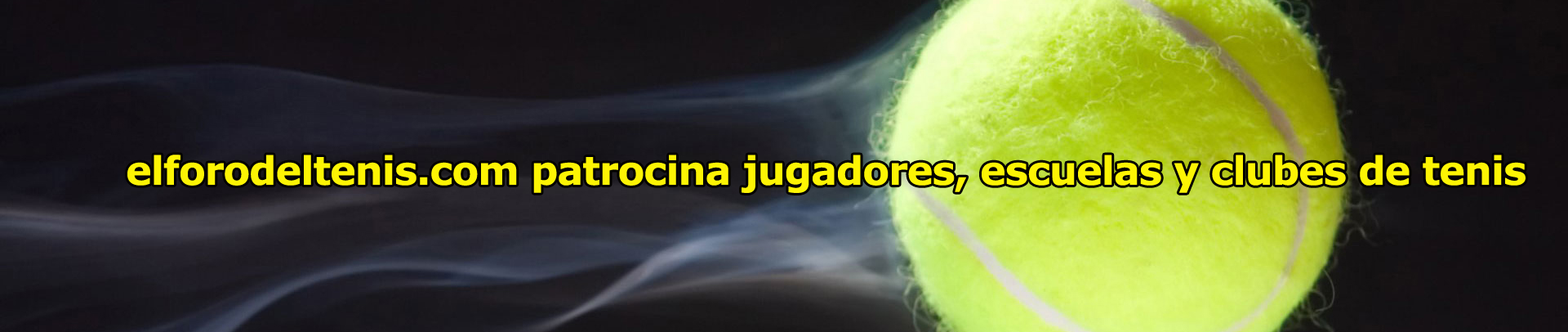
<style>
.page{position:relative;width:1568px;height:332px}
.page>*{position:absolute;margin:0}
.t1{font:39.2px "Verdana-Bold";letter-spacing:-0.025em;color:#fdf404}
</style>
<div class="page">
<p class="t1" style="left:127px;top:154px;width:1399px;height:39px">elforodeltenis.com patrocina jugadores, escuelas y clubes de tenis</p>
</div>
